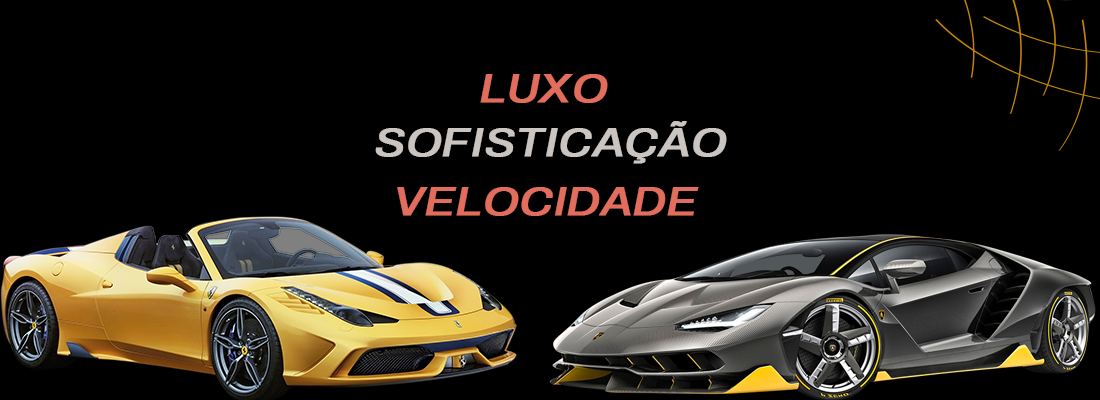
<style>
.page{position:relative;width:1100px;height:400px;background:#000000}
.page>*{position:absolute;margin:0}
.t1{font:40.8px "Archivo-MediumItalic";color:#e26d5c;text-transform:uppercase;font-weight:bold;scale:1.11 1}
.t2{font:40.8px "Archivo-MediumItalic";color:#cbc5c1;text-transform:uppercase;font-weight:bold;scale:1.11 1}
</style>
<div class="page">
<p class="t1" style="left:480px;top:74px;width:128px;height:29px">luxo</p>
<p class="t2" style="left:375px;top:121px;width:352px;height:43px">sofisticação</p>
<p class="t1" style="left:397px;top:187px;width:302px;height:29px">velocidade</p>
</div>
